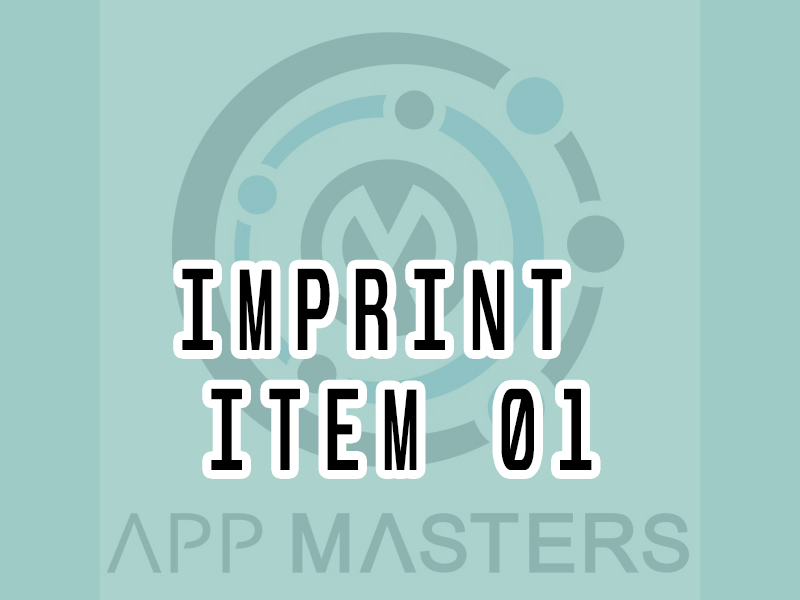
<style>
.page{position:relative;width:800px;height:600px;background:#abd2cd}
.page>*{position:absolute;margin:0}
.t1{font:100.3px/120px "Unispace-Bold";letter-spacing:0.34em;color:#000000;text-transform:uppercase;scale:0.61 1}
</style>
<div class="page">
<p class="t1" style="left:182px;top:268px;width:410px;height:202px;text-align:center">Imprint <br>Item 01</p>
</div>
